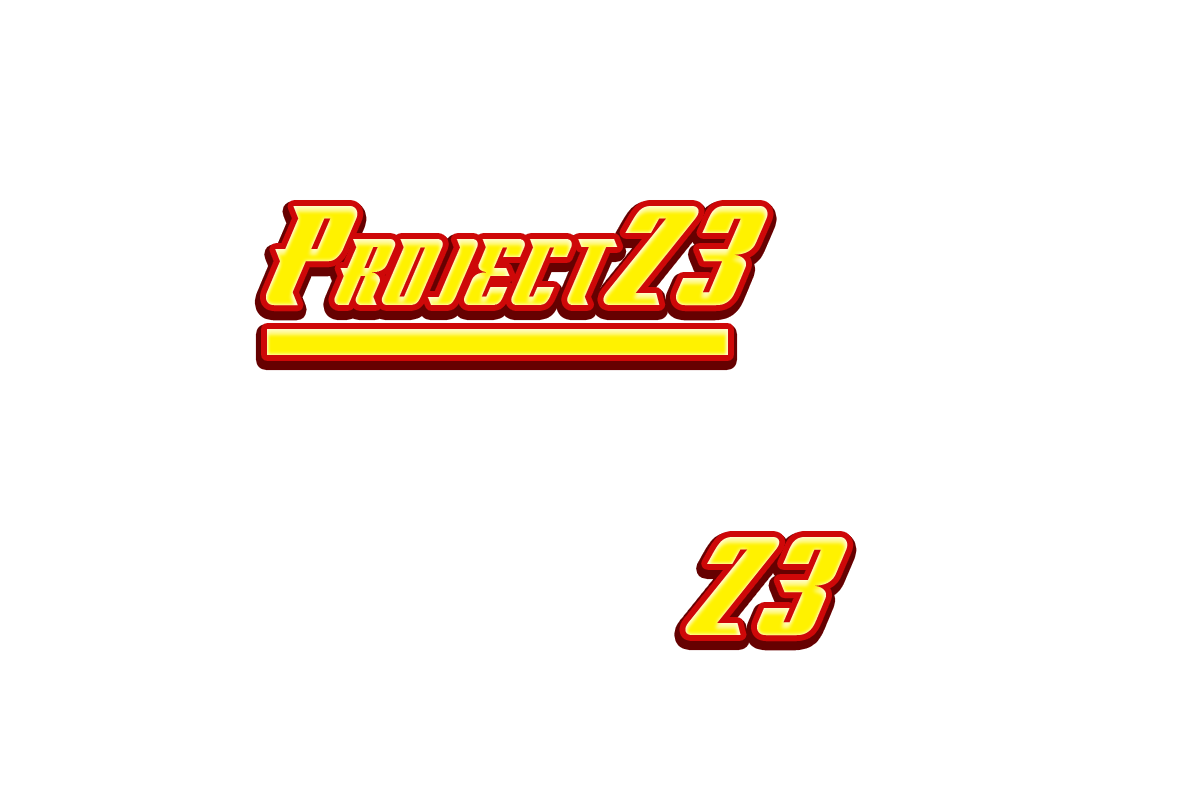
<style>
.page{position:relative;width:1200px;height:800px;background:#ffffff}
.page>*{position:absolute;margin:0}
.t1{font:100px "FlyboyBB"}
.t2{font:150px "FlyboyBB"}
.t3{font:148px "FlyboyBB"}
</style>
<div class="page">
<p class="t1" style="left:266px;top:206px;width:502px;height:100px"><span class="t2">P</span>ROJECT<span class="t2">23</span></p>
<p class="t3" style="left:685px;top:537px;width:163px;height:99px">23</p>
</div>
